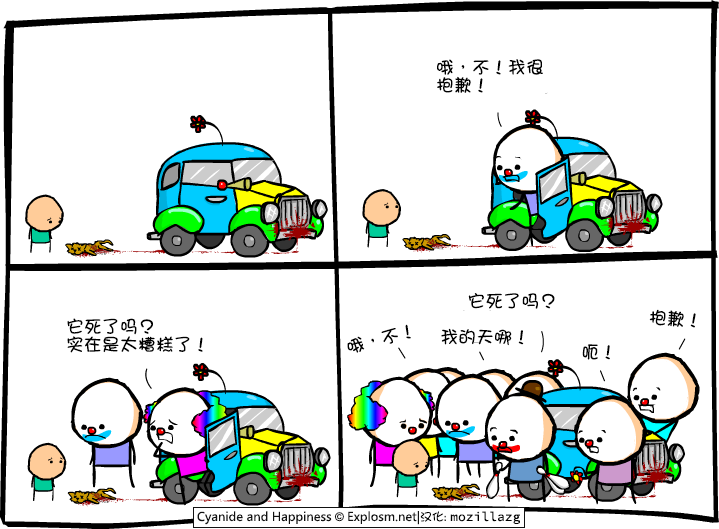
<style>
.page{position:relative;width:719px;height:529px;background:#ffffff}
.page>*{position:absolute;margin:0}
.t1{font:18px/18px "DFGirl";color:#000000}
.t2{font:18px "DFGirl";color:#000000}
</style>
<div class="page">
<p class="t1" style="left:437px;top:59px;width:106px;height:34px">哦，不！我很<br>抱歉！</p>
<p class="t2" style="left:468px;top:293px;width:87px;height:16px">它死了吗？</p>
<p class="t1" style="left:67px;top:318px;width:136px;height:35px">它死了吗？<br>实在是太糟糕了！</p>
<p class="t2" style="left:649px;top:309px;width:47px;height:19px;rotate:4deg">抱歉！</p>
<p class="t2" style="left:347px;top:324px;width:64px;height:29px;rotate:-15deg">哦，不！</p>
<p class="t2" style="left:441px;top:328px;width:83px;height:18px">我的天哪！</p>
<p class="t2" style="left:582px;top:344px;width:28px;height:16px">呃！</p>
</div>
